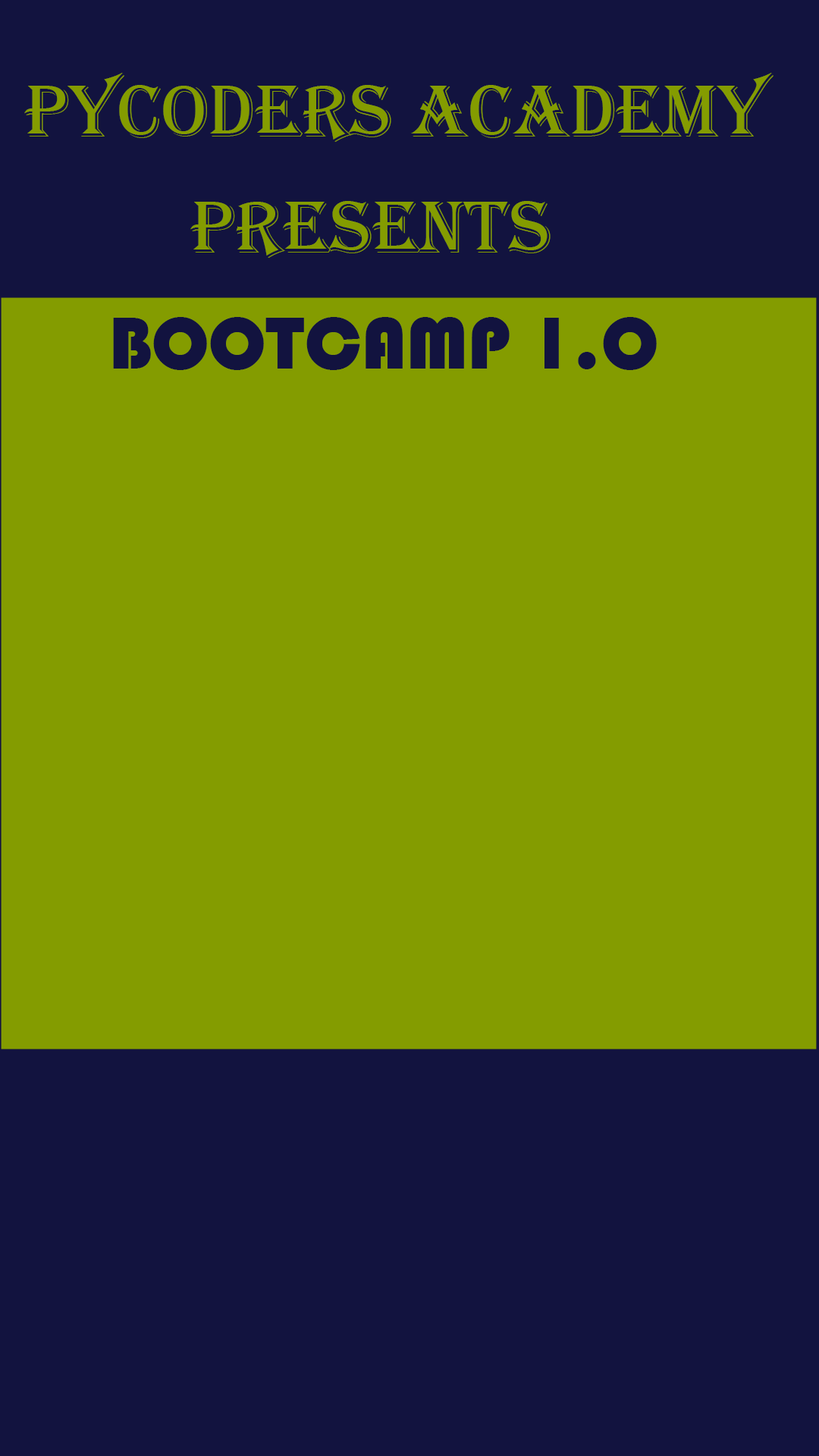
<style>
.page{position:relative;width:819px;height:1456px;background:#849c00}
.page>*{position:absolute;margin:0}
.t1{font:75.8px "Algerian";color:#849c00}
.t2{font:75.8px "Bauhaus93";color:#12133f}
</style>
<div class="page">
<p class="t1" style="left:24px;top:73px;width:749px;height:69px">pyCoders Academy</p>
<p class="t1" style="left:190px;top:201px;width:361px;height:57px">presents</p>
<p class="t2" style="left:113px;top:317px;width:544px;height:53px">BOOTCAMP 1.O</p>
</div>
